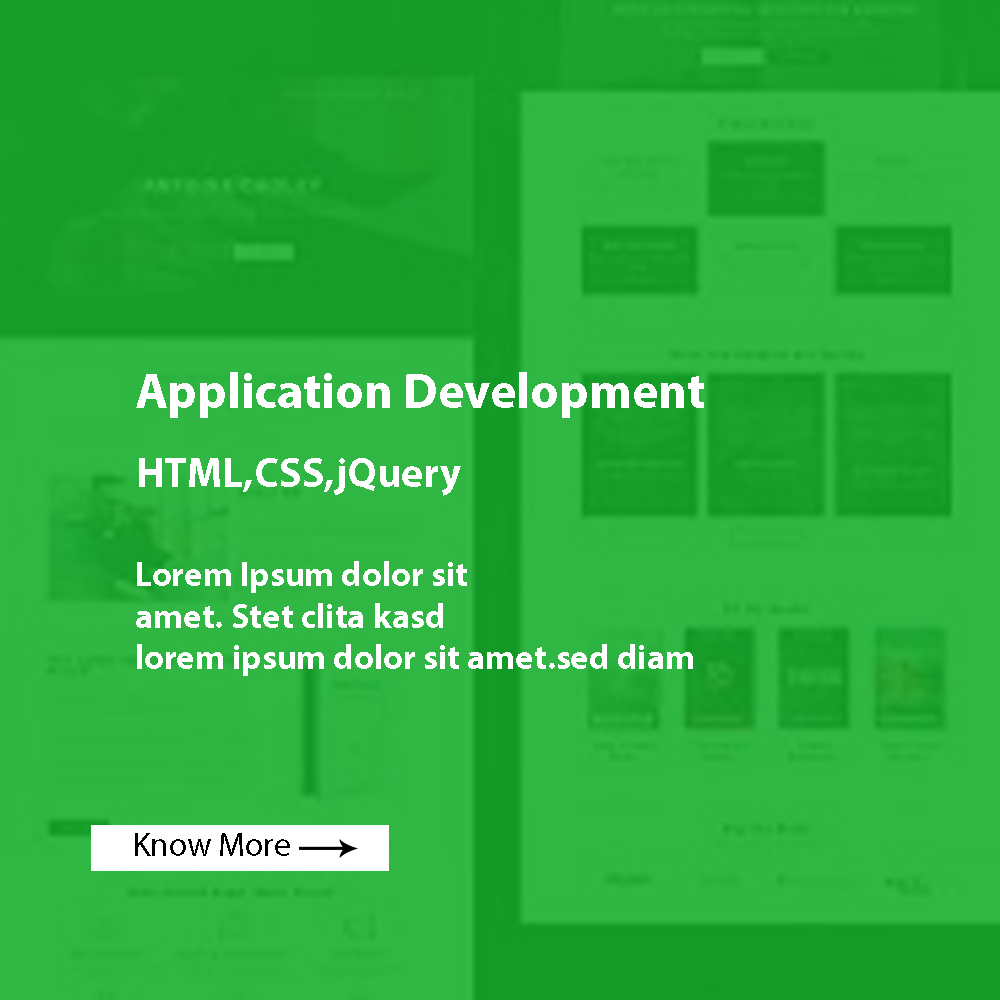
<style>
.page{position:relative;width:1000px;height:1000px;background:#30b642}
.page>*{position:absolute;margin:0}
.t1{font:50px "MyriadPro-Bold";color:#ffffff}
.t2{font:41.7px "MyriadPro-Bold";color:#ffffff}
.t3{font:34.6px "MyriadPro-Bold";color:#ffffff}
.t4{font:33.3px "MyriadPro-Regular";color:#000000}
</style>
<div class="page">
<p class="t1" style="left:136px;top:372px;width:568px;height:46px">Application Development</p>
<p class="t2" style="left:139px;top:458px;width:322px;height:38px">HTML,CSS,jQuery</p>
<p class="t3" style="left:136px;top:561px;width:557px;height:115px">Lorem Ipsum dolor sit<br>amet. Stet clita kasd<br>lorem ipsum dolor sit amet.sed diam</p>
<p class="t4" style="left:135px;top:833px;width:155px;height:23px">Know More</p>
</div>
